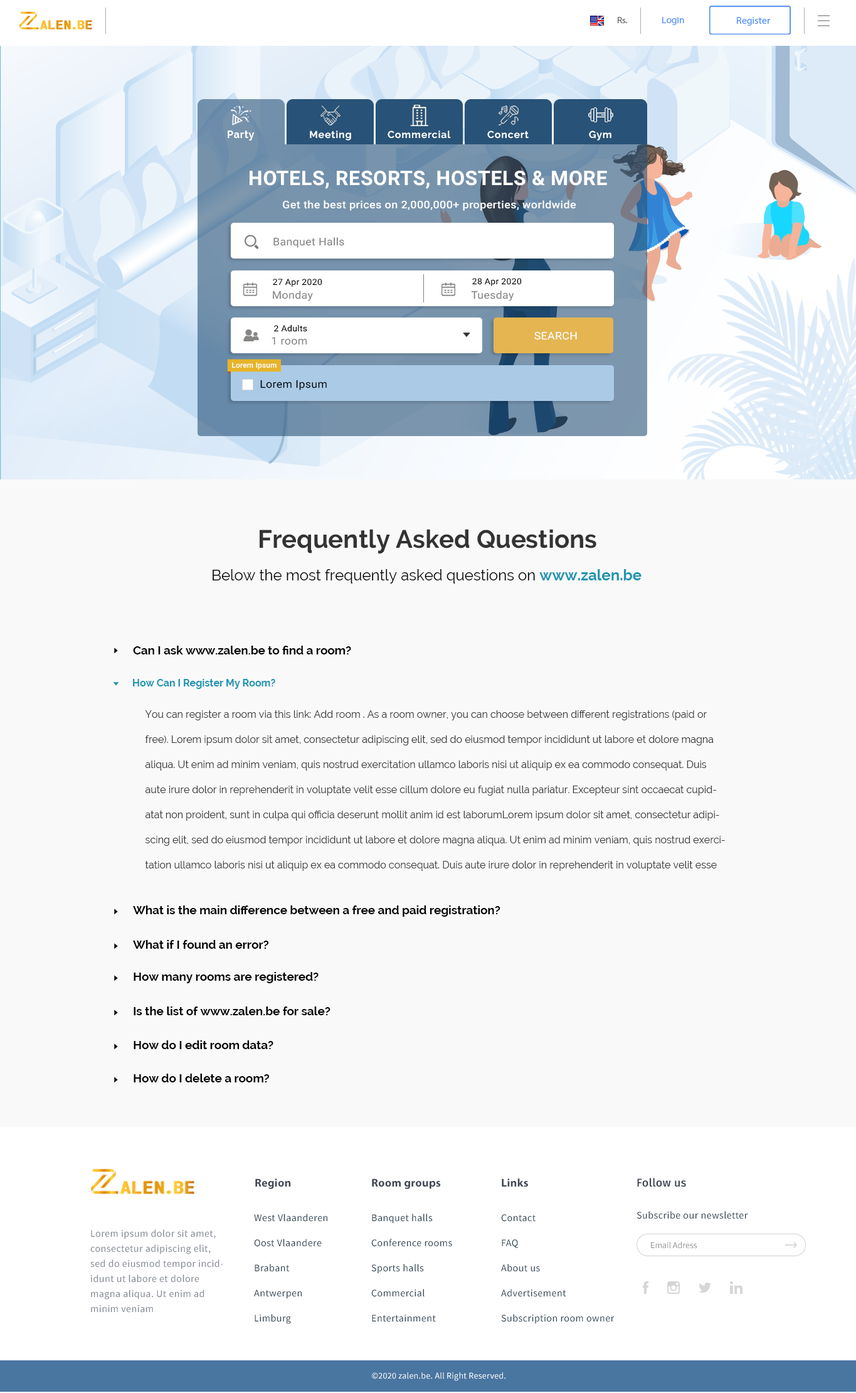
<style>
.page{position:relative;width:856px;height:1393px;background:#f9f9f9}
.page>*{position:absolute;margin:0}
.t1{font:8.8px "MyriadPro-Regular";color:#636363;scale:1.04 1}
.t2{font:9.2px "MyriadPro-Regular";color:#5392f9;scale:1.07 1}
.t3{font:10px "MyriadPro-Regular";color:#5392f9}
.t4{font:7.5px "Raleway-Bold";letter-spacing:0.05em;color:#ffffff}
.t5{font:20.1px "Roboto-Bold";letter-spacing:0.02em;color:#ffffff}
.t6{font:10.6px "Roboto-Medium";letter-spacing:0.02em;color:#ffffff;scale:1.07 1}
.t7{font:10.6px "Roboto-Regular";letter-spacing:0.02em;color:#818181;scale:1.06 1}
.t8{font:8.4px "Roboto-Regular";letter-spacing:0.02em;color:#000000;scale:1.06 1}
.t9{font:10.6px "Roboto-Regular";letter-spacing:0.02em;color:#ffffff;scale:1.06 1}
.t10{font:7.4px "Roboto-Medium";letter-spacing:0.02em;color:#ffffff}
.t11{font:10.6px "Roboto-Regular";letter-spacing:0.02em;color:#000000;scale:1.06 1}
.t12{font:25.1px "Raleway-Bold";color:#333333}
.t13{font:15.1px "Raleway-Regular";color:#000000}
.t14{font:15.1px "Raleway-Bold";color:#1f95b1}
.t15{font:11.7px "Raleway-Bold";color:#000000}
.t16{font:10px "Raleway-Bold";color:#1f95b1}
.t17{font:10px/25.1px "Raleway-Regular";color:#3c3c3c}
.t18{font:11.3px "MyriadPro-Bold";letter-spacing:0.02em;color:#424955}
.t19{font:11.3px "FiraSans-Medium";letter-spacing:0.02em;color:#424955}
.t20{font:10px/25.1px "SourceSansPro-Regular";letter-spacing:0.03em;color:#2e4453}
.t21{font:10px "SourceSansPro-Regular";letter-spacing:0.03em;color:#2e4453}
.t22{font:10px/15.1px "SourceSansPro-Regular";letter-spacing:0.03em;color:#818791}
.t23{font:8.8px "SourceSansPro-Regular";color:#8c8c8c}
.t24{font:8.8px "SourceSansPro-Regular";letter-spacing:0.02em;color:#ffffff}
</style>
<div class="page">
<p class="t1" style="left:618px;top:17px;width:9px;height:6px">Rs.</p>
<p class="t2" style="left:662px;top:17px;width:22px;height:8px">Login</p>
<p class="t3" style="left:737px;top:17px;width:33px;height:9px">Register</p>
<p class="t4" style="left:228px;top:130px;width:27px;height:11px">Party</p>
<p class="t4" style="left:310px;top:130px;width:41px;height:11px">Meeting</p>
<p class="t4" style="left:388px;top:130px;width:63px;height:9px">Commercial</p>
<p class="t4" style="left:487px;top:130px;width:42px;height:9px">Concert</p>
<p class="t4" style="left:589px;top:130px;width:23px;height:11px">Gym</p>
<p class="t5" style="left:250px;top:171px;width:357px;height:18px">HOTELS, RESORTS, HOSTELS &amp; MORE</p>
<p class="t6" style="left:283px;top:200px;width:293px;height:11px">Get the best prices on 2,000,000+ properties, worldwide</p>
<p class="t7" style="left:274px;top:237px;width:70px;height:11px">Banquet Halls</p>
<p class="t8" style="left:273px;top:279px;width:49px;height:8px">27 Apr 2020</p>
<p class="t8" style="left:472px;top:278px;width:50px;height:8px">28 Apr 2020</p>
<p class="t7" style="left:273px;top:290px;width:40px;height:11px">Monday</p>
<p class="t7" style="left:471px;top:290px;width:43px;height:11px">Tuesday</p>
<p class="t8" style="left:274px;top:324px;width:33px;height:8px">2 Adults</p>
<p class="t7" style="left:272px;top:337px;width:35px;height:8px">1 room</p>
<p class="t9" style="left:534px;top:331px;width:43px;height:9px">SEARCH</p>
<p class="t10" style="left:232px;top:362px;width:45px;height:7px">Lorem Ipsum</p>
<p class="t11" style="left:260px;top:380px;width:67px;height:10px">Lorem Ipsum</p>
<p class="t12" style="left:260px;top:529px;width:337px;height:25px">Frequently Asked Questions</p>
<p class="t13" style="left:213px;top:569px;width:429px;height:14px">Below the most frequently asked questions on <span class="t14">www.zalen.be</span></p>
<p class="t15" style="left:133px;top:645px;width:218px;height:9px">Can I ask www.zalen.be to find a room?</p>
<p class="t16" style="left:133px;top:679px;width:142px;height:10px">How Can I Register My Room?</p>
<p class="t17" style="left:145px;top:710px;width:580px;height:161px">You can register a room via this link: Add room . As a room owner, you can choose between different registrations (paid or free). Lorem ipsum dolor sit amet, consectetur adipiscing elit, sed do eiusmod tempor incididunt ut labore et dolore magna aliqua. Ut enim ad minim veniam, quis nostrud exercitation ullamco laboris nisi ut aliquip ex ea commodo consequat. Duis aute irure dolor in reprehenderit in voluptate velit esse cillum dolore eu fugiat nulla pariatur. Excepteur sint occaecat cupidatat non proident, sunt in culpa qui officia deserunt mollit anim id est laborumLorem ipsum dolor sit amet, consectetur adipiscing elit, sed do eiusmod tempor incididunt ut labore et dolore magna aliqua. Ut enim ad minim veniam, quis nostrud exercitation ullamco laboris nisi ut aliquip ex ea commodo consequat. Duis aute irure dolor in reprehenderit in voluptate velit esse cillum dolore eu fugiat nulla pariatur. Excepteur sint occaecat cupidatat non proident, sunt in culpa qui officia deserunt mollit anim id est laborum</p>
<p class="t15" style="left:133px;top:905px;width:368px;height:11px">What is the main difference between a free and paid registration?</p>
<p class="t15" style="left:133px;top:940px;width:136px;height:8px">What if I found an error?</p>
<p class="t15" style="left:134px;top:972px;width:185px;height:11px">How many rooms are registered?</p>
<p class="t15" style="left:134px;top:1006px;width:197px;height:9px">Is the list of www.zalen.be for sale?</p>
<p class="t15" style="left:134px;top:1040px;width:140px;height:9px">How do I edit room data?</p>
<p class="t15" style="left:134px;top:1073px;width:136px;height:9px">How do I delete a room?</p>
<p class="t18" style="left:255px;top:1178px;width:36px;height:11px">Region</p>
<p class="t18" style="left:372px;top:1178px;width:69px;height:11px">Room groups</p>
<p class="t18" style="left:502px;top:1178px;width:26px;height:9px">Links</p>
<p class="t19" style="left:637px;top:1177px;width:49px;height:10px">Follow us</p>
<p class="t20" style="left:254px;top:1213px;width:73px;height:111px">West Vlaanderen<br>Oost Vlaandere<br>Brabant<br>Antwerpen<br>Limburg</p>
<p class="t20" style="left:371px;top:1213px;width:81px;height:109px">Banquet halls<br>Conference rooms<br>Sports halls<br>Commercial<br>Entertainment</p>
<p class="t20" style="left:501px;top:1214px;width:114px;height:110px">Contact<br>FAQ<br>About us<br>Advertisement<br>Subscription room owner</p>
<p class="t21" style="left:637px;top:1211px;width:111px;height:8px">Subscribe our newsletter</p>
<p class="t22" style="left:90px;top:1229px;width:133px;height:83px">Lorem ipsum dolor sit amet, consectetur adipiscing elit, sed do eiusmod tempor incididunt ut labore et dolore magna aliqua. Ut enim ad minim veniam</p>
<p class="t23" style="left:651px;top:1241px;width:47px;height:7px">Email Adress</p>
<p class="t24" style="left:372px;top:1372px;width:134px;height:9px">©2020 zalen.be. All Right Reserved.</p>
</div>
